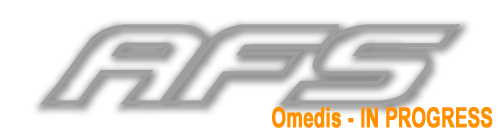
<style>
.page{position:relative;width:500px;height:138px;background:#ffffff}
.page>*{position:absolute;margin:0}
.t1{font:27.7px "ArialNarrow-Bold";color:#ff9000;font-weight:bold;scale:0.8 1}
</style>
<div class="page">
<p class="t1" style="left:272px;top:107px;width:221px;height:21px">Omedis - IN PROGRESS</p>
</div>
